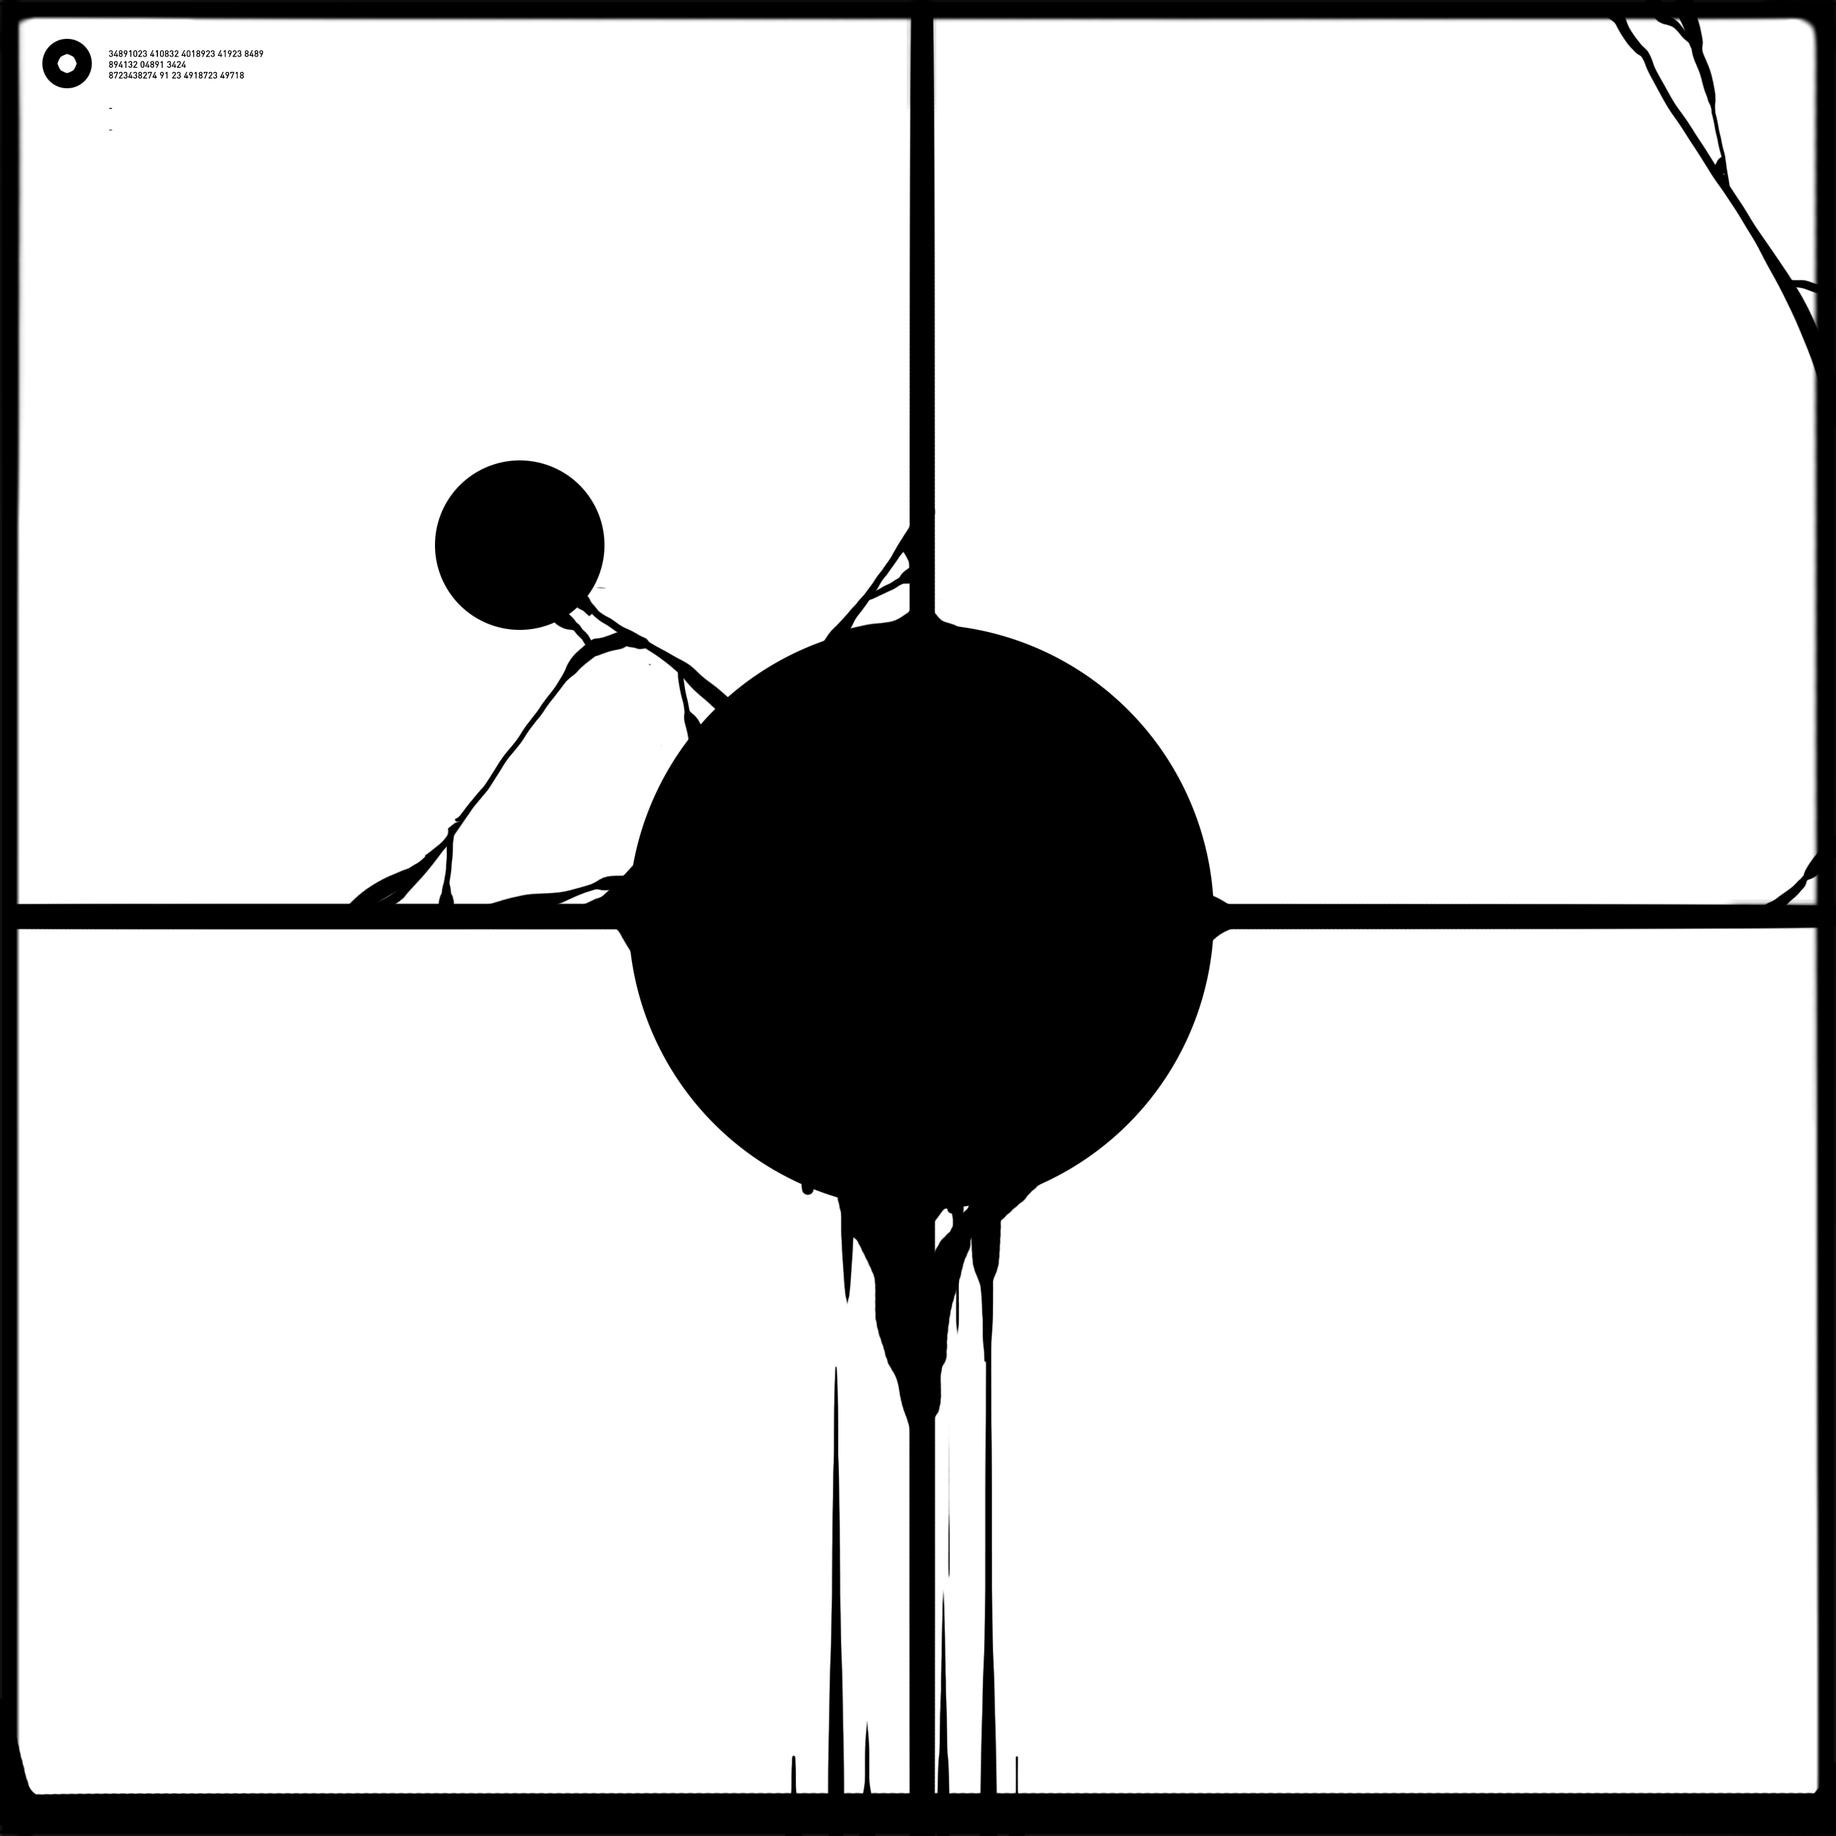
<style>
.page{position:relative;width:1836px;height:1836px;background:#ffffff}
.page>*{position:absolute;margin:0}
.t1{font:9px "DIN-Regular";letter-spacing:-0.01em;color:#000000;font-weight:bold}
</style>
<div class="page">
<p class="t1" style="left:109px;top:50px;width:154px;height:81px">34891023 410832 4018923 41923 8489<br>894132 04891 3424<br>8723438274 91 23 4918723 49718<br><br><br>-<br><br>-</p>
</div>
